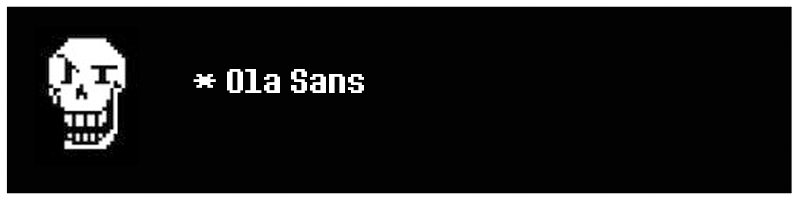
<style>
.page{position:relative;width:800px;height:200px;background:#020202}
.page>*{position:absolute;margin:0}
.t1{font:36px "DeterminationSans";color:#ffffff}
</style>
<div class="page">
<p class="t1" style="left:193px;top:69px;width:171px;height:24px">* Ola Sans</p>
</div>
